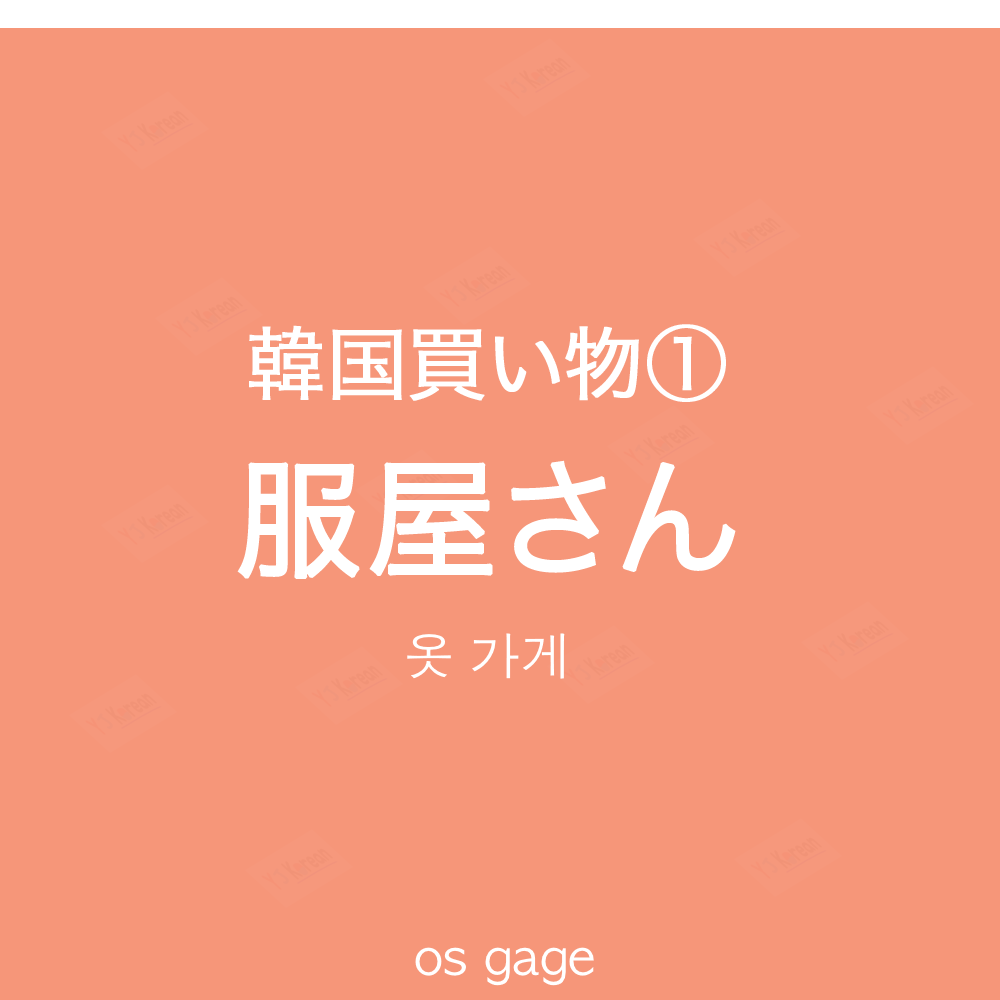
<style>
.page{position:relative;width:1000px;height:1000px;background:#f69679}
.page>*{position:absolute;margin:0}
.t1{font:80px "HiraKakuProN-W3";color:#ffffff;font-weight:bold}
.t2{font:130px "HiraKakuProN-W3";color:#ffffff;font-weight:bold}
.t3{font:50px "AppleGothic";color:#ffffff}
</style>
<div class="page">
<p class="t1" style="left:249px;top:324px;width:477px;height:78px">韓国買い物①</p>
<p class="t2" style="left:237px;top:460px;width:499px;height:119px">服屋さん</p>
<p class="t3" style="left:407px;top:633px;width:158px;height:46px">옷 가게</p>
<p class="t3" style="left:415px;top:947px;width:179px;height:39px">os gage</p>
</div>
